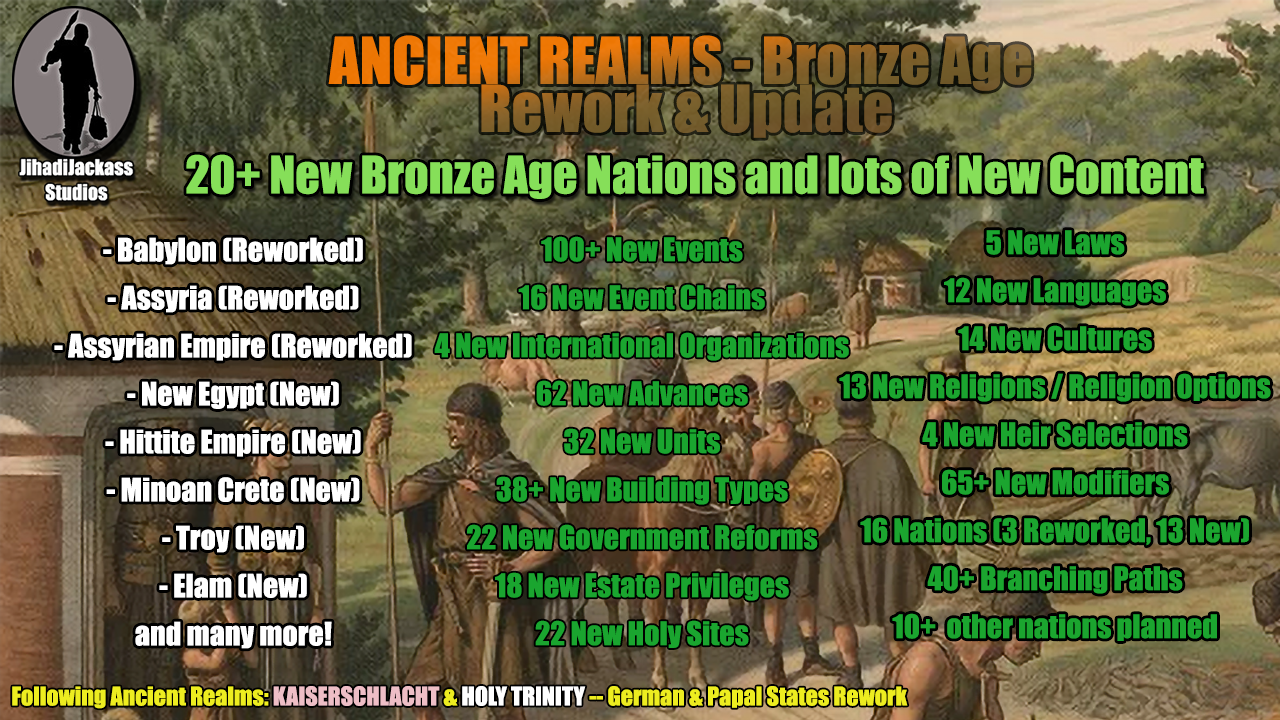
<style>
.page{position:relative;width:1280px;height:720px}
.page>*{position:absolute;margin:0}
.t1{font:60px/48px "Impact"}
.t2{font:48px "Impact";color:#86df59}
.t3{font:30px/48px "Impact";color:#1ba52f}
.t4{font:30px/48px "Impact";color:#ffffff}
.t5{font:30px/48px "Impact";color:#1aa52f}
.t6{font:24px "Impact";color:#eded20}
.t7{font:24px "Impact";color:#eebec6}
.t8{font:24px "Impact";color:#ffffff}
</style>
<div class="page">
<p class="t1" style="left:328px;top:35px;width:704px;height:103px;text-align:center">ANCIENT REALMS - Bronze Age <br>Rework &amp; Update</p>
<p class="t2" style="left:186px;top:154px;width:1018px;height:45px">20+ New Bronze Age Nations and lots of New Content</p>
<p class="t3" style="left:839px;top:230px;width:432px;height:411px;text-align:center">5 New Laws<br>12 New Languages<br>14 New Cultures<br>13 New Religions / Religion Options<br>4 New Heir Selections<br>65+ New Modifiers<br>16 Nations (3 Reworked, 13 New)<br>40+ Branching Paths<br>10+  other nations planned</p>
<p class="t4" style="left:54px;top:237px;width:358px;height:412px;text-align:center">- Babylon (Reworked)<br>- Assyria (Reworked)<br>- Assyrian Empire (Reworked)<br>- New Egypt (New)<br>- Hittite Empire (New)<br>- Minoan Crete (New)<br>- Troy (New)<br>- Elam (New)<br>and many more!</p>
<p class="t5" style="left:434px;top:236px;width:415px;height:412px;text-align:center">100+ New Events<br>16 New Event Chains<br>4 New International Organizations<br>62 New Advances<br>32 New Units<br>38+ New Building Types<br>22 New Government Reforms<br>18 New Estate Privileges<br>22 New Holy Sites</p>
<p class="t6" style="left:12px;top:686px;width:896px;height:23px">Following Ancient Realms: <span class="t7">KAISERSCHLACHT</span> &amp; <span class="t8">HOLY TRINITY</span> -- German &amp; Papal States Rework</p>
</div>
